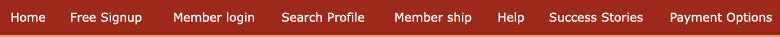
<style>
.page{position:relative;width:780px;height:37px;background:#9e281a}
.page>*{position:absolute;margin:0}
.t1{font:12px "Verdana";color:#ffffff}
</style>
<div class="page">
<p class="t1" style="left:11px;top:12px;width:34px;height:10px">Home</p>
<p class="t1" style="left:71px;top:12px;width:71px;height:13px">Free Signup</p>
<p class="t1" style="left:174px;top:12px;width:80px;height:13px">Member login</p>
<p class="t1" style="left:282px;top:12px;width:83px;height:10px">Search Profile</p>
<p class="t1" style="left:395px;top:12px;width:77px;height:13px">Member ship</p>
<p class="t1" style="left:498px;top:12px;width:26px;height:13px">Help</p>
<p class="t1" style="left:549px;top:12px;width:94px;height:10px">Success Stories</p>
<p class="t1" style="left:670px;top:12px;width:102px;height:13px">Payment Options</p>
</div>
